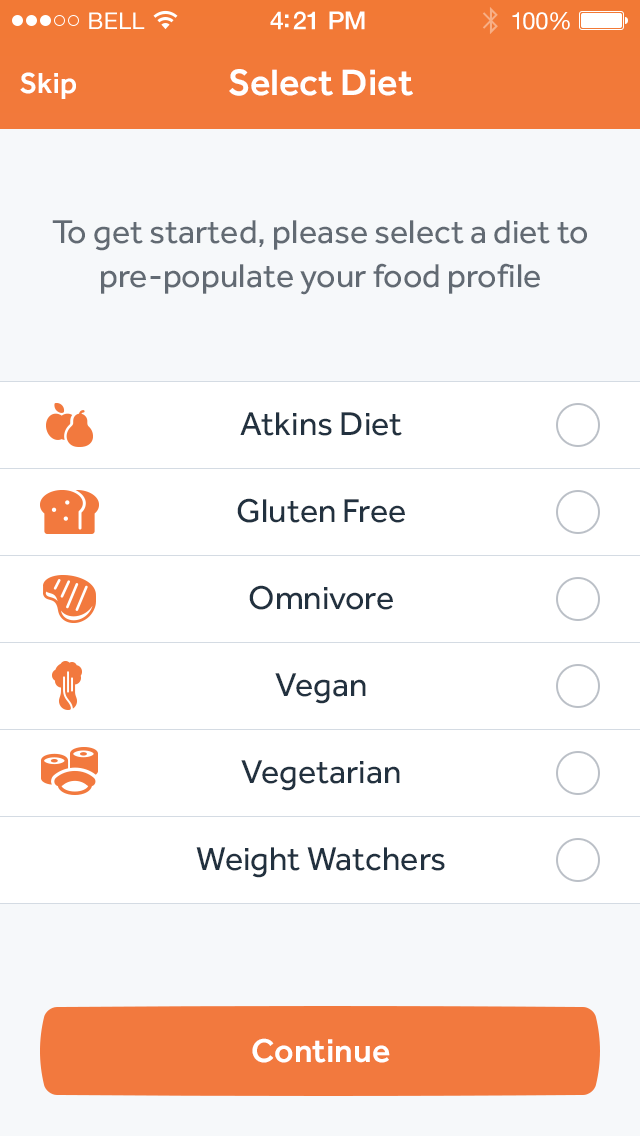
<style>
.page{position:relative;width:640px;height:1136px;background:#ffffff}
.page>*{position:absolute;margin:0}
.t1{font:23px "HelveticaNeue";letter-spacing:0.02em;color:#ffffff}
.t2{font:25px "HelveticaNeue-Medium";letter-spacing:-0.02em;color:#ffffff}
.t3{font:24px "HelveticaNeue";letter-spacing:-0.02em;color:#ffffff}
.t4{font:30px "Effra-Medium";color:#ffffff}
.t5{font:38px "Effra-Medium";color:#ffffff}
.t6{font:34px/44px "Effra-Regular";color:#626a73}
.t7{font:34px "Effra-Regular";color:#22313f}
.t8{font:34px "Effra-Medium";color:#ffffff}
</style>
<div class="page">
<p class="t1" style="left:89px;top:12px;width:56px;height:17px">BELL</p>
<p class="t1" style="left:89px;top:12px;width:56px;height:17px">BELL</p>
<p class="t2" style="left:270px;top:11px;width:95px;height:19px">4:21 PM</p>
<p class="t2" style="left:270px;top:11px;width:95px;height:19px">4:21 PM</p>
<p class="t3" style="left:512px;top:12px;width:58px;height:18px">100%</p>
<p class="t3" style="left:512px;top:12px;width:58px;height:18px">100%</p>
<p class="t4" style="left:20px;top:72px;width:56px;height:27px">Skip</p>
<p class="t5" style="left:229px;top:69px;width:184px;height:27px">Select Diet</p>
<p class="t6" style="left:52px;top:220px;width:535px;height:75px;text-align:center">To get started, please select a diet to pre-populate your food profile</p>
<p class="t7" style="left:240px;top:412px;width:162px;height:24px">Atkins Diet</p>
<p class="t7" style="left:237px;top:498px;width:168px;height:25px">Gluten Free</p>
<p class="t7" style="left:249px;top:585px;width:144px;height:25px">Omnivore</p>
<p class="t7" style="left:275px;top:673px;width:91px;height:31px">Vegan</p>
<p class="t7" style="left:241px;top:760px;width:159px;height:31px">Vegetarian</p>
<p class="t7" style="left:196px;top:847px;width:249px;height:31px">Weight Watchers</p>
<p class="t8" style="left:252px;top:1038px;width:138px;height:25px">Continue</p>
</div>
